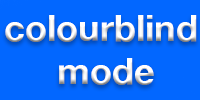
<style>
.page{position:relative;width:200px;height:100px;background:#0267ff}
.page>*{position:absolute;margin:0}
.t1{font:36px "HelveticaNeue-Bold";color:#ffffff}
</style>
<div class="page">
<p class="t1" style="left:5px;top:15px;width:192px;height:70px;text-align:center">colourblind<br> mode</p>
</div>
